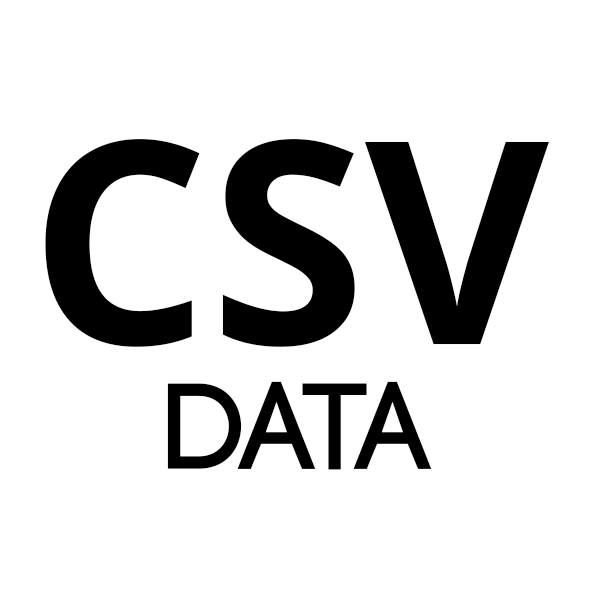
<style>
.page{position:relative;width:600px;height:600px;background:#ffffff}
.page>*{position:absolute;margin:0}
.t1{font:282.7px "OpenSans-Bold";color:#000000}
.t2{font:122.3px "Code-Bold";color:#000000}
</style>
<div class="page">
<p class="t1" style="left:45px;top:139px;width:504px;height:208px">CSV</p>
<p class="t2" style="left:167px;top:381px;width:265px;height:89px">data</p>
</div>
